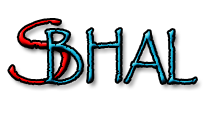
<style>
.page{position:relative;width:205px;height:140px;background:#ffffff}
.page>*{position:absolute;margin:0}
.t1{font:65.1px "Papyrus-Regular"}
.t2{font:55px "Papyrus-Regular";scale:0.75 1}
</style>
<div class="page">
<p class="t1" style="left:9px;top:20px;width:60px;height:64px">S</p>
<p class="t2" style="left:45px;top:29px;width:151px;height:55px">BHAL</p>
</div>
